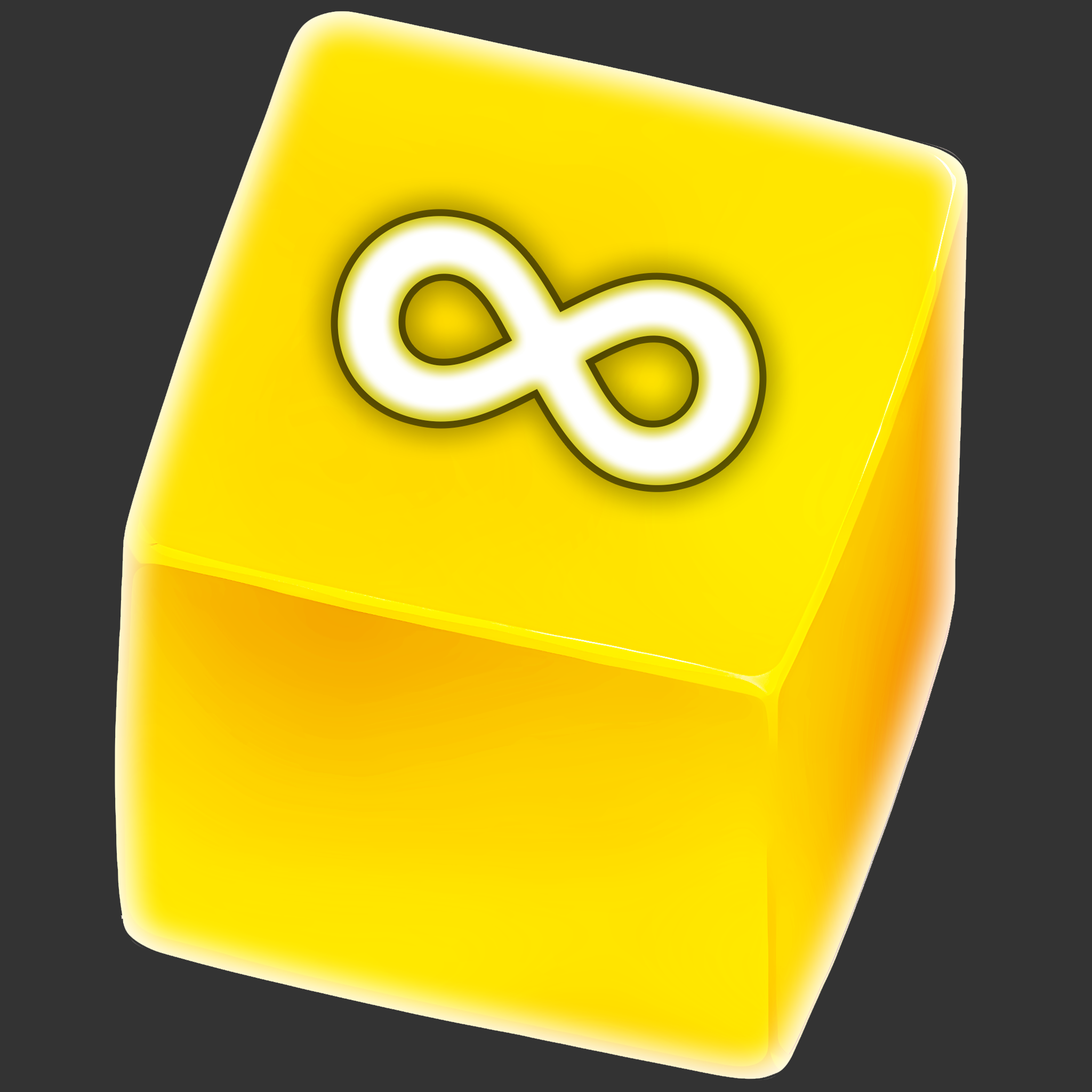
<style>
.page{position:relative;width:1092px;height:1092px;background:#333333}
.page>*{position:absolute;margin:0}
.t1{font:615.8px "MyriadPro-Bold";letter-spacing:0.02em}
</style>
<div class="page">
<p class="t1" style="left:338px;top:216px;width:422px;height:269px;rotate:16deg">∞</p>
</div>
